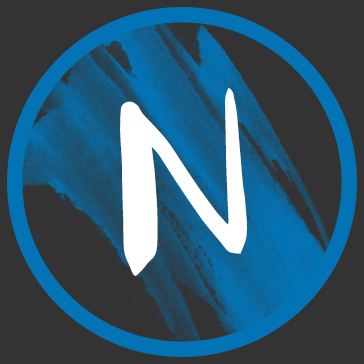
<style>
.page{position:relative;width:364px;height:364px;background:#333333}
.page>*{position:absolute;margin:0}
.t1{font:139.7px "Luna";color:#ffffff}
</style>
<div class="page">
<p class="t1" style="left:120px;top:88px;width:127px;height:188px">N</p>
</div>
